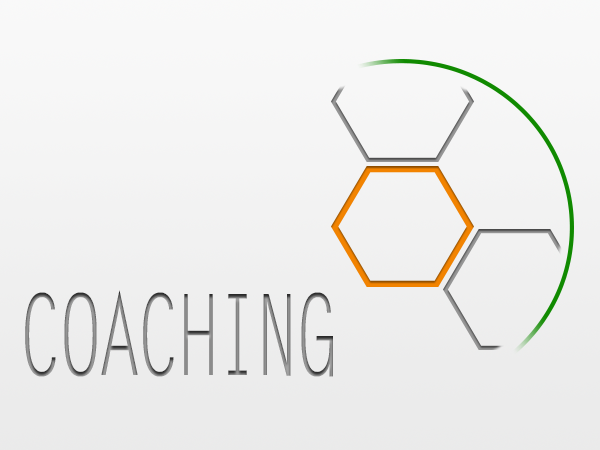
<style>
.page{position:relative;width:600px;height:450px}
.page>*{position:absolute;margin:0}
.t1{font:112.5px "LetterGothicStd";letter-spacing:-0.075em;color:#878787;scale:0.67 1}
</style>
<div class="page">
<p class="t1" style="left:25px;top:290px;width:308px;height:87px">COACHING</p>
</div>
